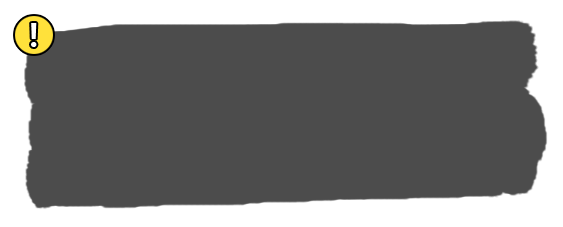
<style>
.page{position:relative;width:563px;height:227px;background:#4c4c4c}
.page>*{position:absolute;margin:0}
.t1{font:33.5px "Roboto-Bold";color:#ffffff}
</style>
<div class="page">
<p class="t1" style="left:31px;top:23px;width:6px;height:24px">!</p>
</div>
